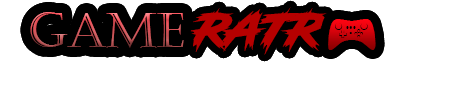
<style>
.page{position:relative;width:450px;height:100px;background:#ffffff}
.page>*{position:absolute;margin:0}
.t1{font:48px "Castellar"}
.t2{font:48px "Sectar";color:#b60000}
.t3{font:48px "Controllers-Regular"}
</style>
<div class="page">
<p class="t1" style="left:30px;top:12px;width:154px;height:36px">GAME</p>
<p class="t2" style="left:187px;top:7px;width:140px;height:48px">RATR</p>
<p class="t3" style="left:328px;top:19px;width:48px;height:31px">L</p>
</div>
